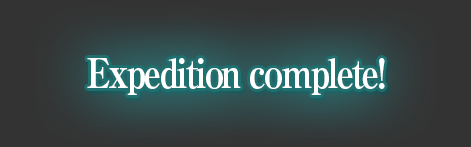
<style>
.page{position:relative;width:471px;height:147px;background:#333333}
.page>*{position:absolute;margin:0}
.t1{font:40px "RyuminPro-ExBold";letter-spacing:-0.08em;color:#ffffff;scale:0.9 1}
</style>
<div class="page">
<p class="t1" style="left:87px;top:58px;width:298px;height:37px">Expedition complete!</p>
</div>
